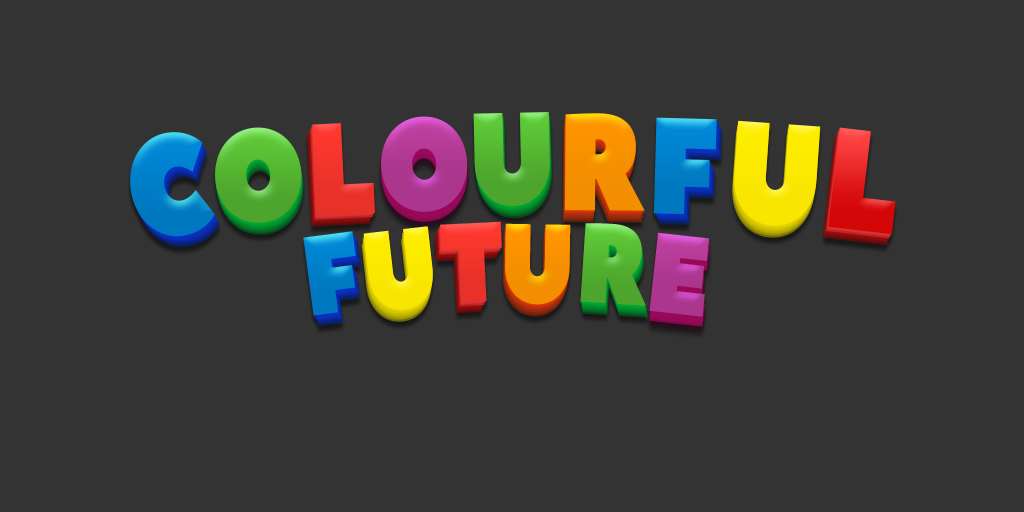
<style>
.page{position:relative;width:1024px;height:512px;background:#333333}
.page>*{position:absolute;margin:0}
.t1{font:130.3px "PeaceSans";color:#54b331;text-transform:uppercase;scale:0.85 1}
.t2{font:136.5px "PeaceSans";color:#f69000;text-transform:uppercase;scale:0.85 1}
.t3{font:130.3px "PeaceSans";color:#ec332a;text-transform:uppercase;scale:0.85 1}
.t4{font:130.3px "PeaceSans";color:#af3992;text-transform:uppercase;scale:0.85 1}
.t5{font:136.5px "PeaceSans";color:#0081cd;text-transform:uppercase;scale:0.85 1}
.t6{font:142.7px "PeaceSans";color:#fae900;text-transform:uppercase;scale:0.85 1}
.t7{font:142.7px "PeaceSans";color:#0080ca;text-transform:uppercase;scale:0.85 1}
.t8{font:130.3px "PeaceSans";color:#54b431;text-transform:uppercase;scale:0.85 1}
.t9{font:142.7px "PeaceSans";text-transform:uppercase;scale:0.85 1}
.t10{font:111.7px "PeaceSans";color:#f7362c;text-transform:uppercase;scale:0.85 1}
.t11{font:111.7px "PeaceSans";color:#0081cc;text-transform:uppercase;scale:0.85 1}
.t12{font:111.7px "PeaceSans";color:#fae900;text-transform:uppercase;scale:0.85 1}
.t13{font:111.7px "PeaceSans";color:#f79100;text-transform:uppercase;scale:0.85 1}
.t14{font:111.7px "PeaceSans";color:#54b331;text-transform:uppercase;scale:0.85 1}
.t15{font:111.7px "PeaceSans";color:#b13994;text-transform:uppercase;scale:0.85 1}
</style>
<div class="page">
<p class="t1" style="left:473px;top:112px;width:77px;height:95px;rotate:-1deg">u</p>
<p class="t2" style="left:564px;top:113px;width:81px;height:98px">R</p>
<p class="t3" style="left:312px;top:123px;width:63px;height:93px;rotate:-3deg">l</p>
<p class="t4" style="left:381px;top:116px;width:87px;height:96px;rotate:-3deg">o</p>
<p class="t5" style="left:653px;top:117px;width:64px;height:98px;rotate:2deg">f</p>
<p class="t6" style="left:734px;top:120px;width:87px;height:106px;rotate:4deg">u</p>
<p class="t7" style="left:130px;top:132px;width:85px;height:105px;rotate:-10deg">c</p>
<p class="t8" style="left:215px;top:127px;width:87px;height:96px;rotate:-3deg">o</p>
<p class="t9" style="left:828px;top:127px;width:68px;height:108px;rotate:7deg">l</p>
<p class="t10" style="left:440px;top:221px;width:62px;height:82px;rotate:-3deg">T</p>
<p class="t11" style="left:303px;top:231px;width:53px;height:85px;rotate:-7deg">f</p>
<p class="t12" style="left:363px;top:226px;width:70px;height:84px;rotate:-7deg">u</p>
<p class="t13" style="left:505px;top:223px;width:66px;height:82px;rotate:1deg">u</p>
<p class="t14" style="left:580px;top:223px;width:66px;height:83px;rotate:4deg">R</p>
<p class="t15" style="left:649px;top:232px;width:60px;height:85px;rotate:6deg">E</p>
</div>
